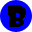
<style>
.page{position:relative;width:32px;height:32px;background:#0000ff}
.page>*{position:absolute;margin:0}
.t1{font:28.3px "ShowcardGothic-Reg";color:#000000}
</style>
<div class="page">
<p class="t1" style="left:8px;top:5px;width:18px;height:22px">B</p>
</div>
